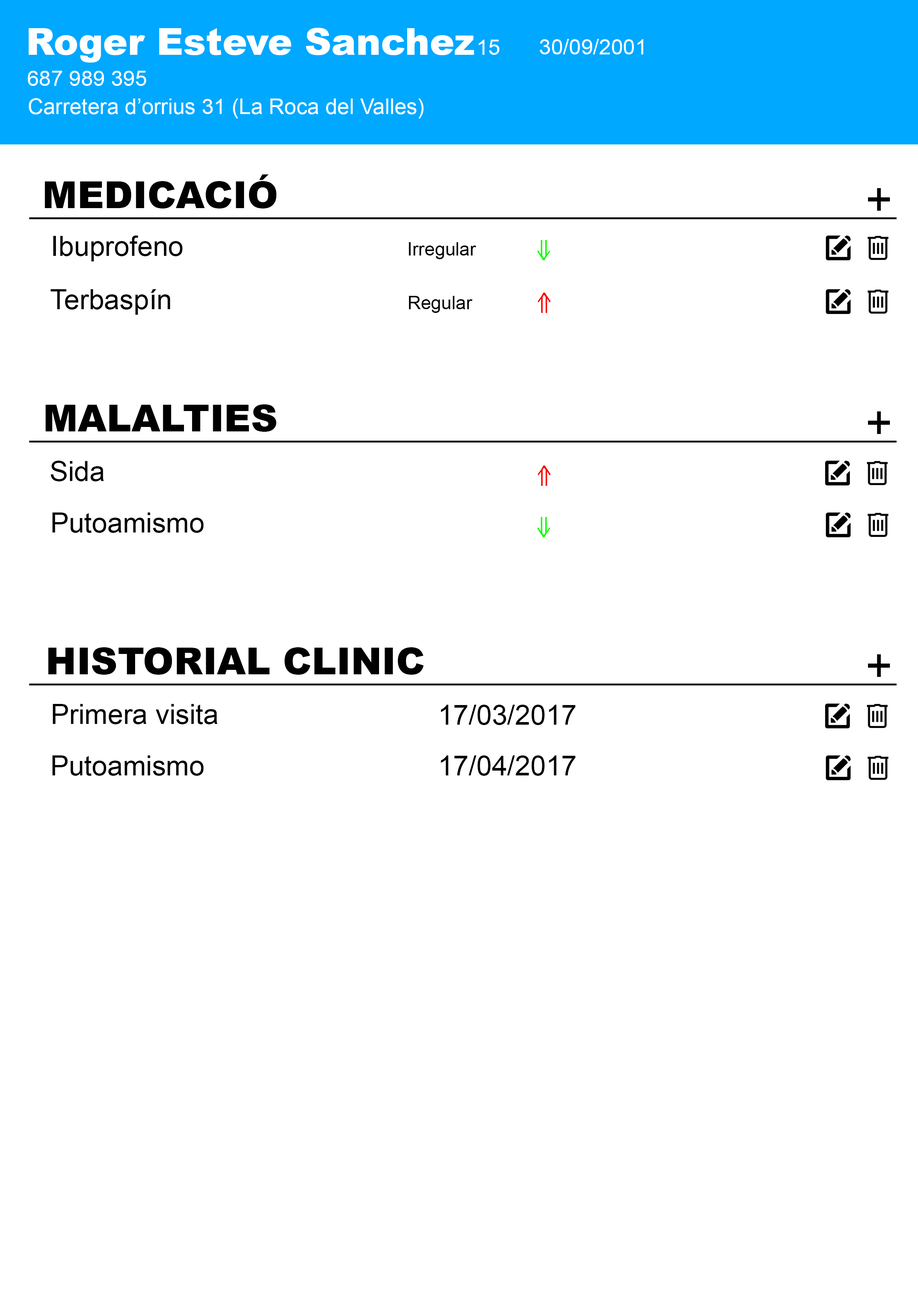
<style>
.page{position:relative;width:918px;height:1299px;background:#ffffff}
.page>*{position:absolute;margin:0}
.t1{font:37px "Arial-Black";color:#ffffff}
.t2{font:21.6px "ArialMT";color:#ffffff}
.t3{font:37px "Arial-Black";color:#000000}
.t4{font:46.3px "ArialMT";color:#000000}
.t5{font:27.8px "ArialMT";color:#000000}
.t6{font:18.5px "ArialMT";color:#000000}
</style>
<div class="page">
<p class="t1" style="left:29px;top:28px;width:445px;height:35px">Roger Esteve Sanchez</p>
<p class="t2" style="left:479px;top:40px;width:20px;height:15px">15</p>
<p class="t2" style="left:540px;top:39px;width:103px;height:15px">30/09/2001</p>
<p class="t2" style="left:28px;top:71px;width:118px;height:15px">687 989 395</p>
<p class="t2" style="left:29px;top:98px;width:395px;height:20px">Carretera d’orrius 31 (La Roca del Valles)</p>
<p class="t3" style="left:45px;top:174px;width:232px;height:34px">MEDICACIÓ</p>
<p class="t4" style="left:868px;top:188px;width:22px;height:23px">+</p>
<p class="t5" style="left:53px;top:235px;width:130px;height:26px">Ibuprofeno</p>
<p class="t6" style="left:409px;top:242px;width:67px;height:17px">Irregular</p>
<p class="t5" style="left:50px;top:289px;width:120px;height:26px">Terbaspín</p>
<p class="t6" style="left:409px;top:296px;width:64px;height:17px">Regular</p>
<p class="t3" style="left:46px;top:404px;width:231px;height:28px">MALALTIES</p>
<p class="t4" style="left:868px;top:411px;width:22px;height:23px">+</p>
<p class="t5" style="left:51px;top:461px;width:53px;height:20px">Sida</p>
<p class="t5" style="left:52px;top:512px;width:152px;height:21px">Putoamismo</p>
<p class="t3" style="left:48px;top:647px;width:376px;height:28px">HISTORIAL CLINIC</p>
<p class="t4" style="left:868px;top:654px;width:22px;height:23px">+</p>
<p class="t5" style="left:53px;top:704px;width:165px;height:20px">Primera visita</p>
<p class="t5" style="left:441px;top:705px;width:135px;height:20px">17/03/2017</p>
<p class="t5" style="left:52px;top:755px;width:152px;height:21px">Putoamismo</p>
<p class="t5" style="left:441px;top:755px;width:135px;height:21px">17/04/2017</p>
</div>
